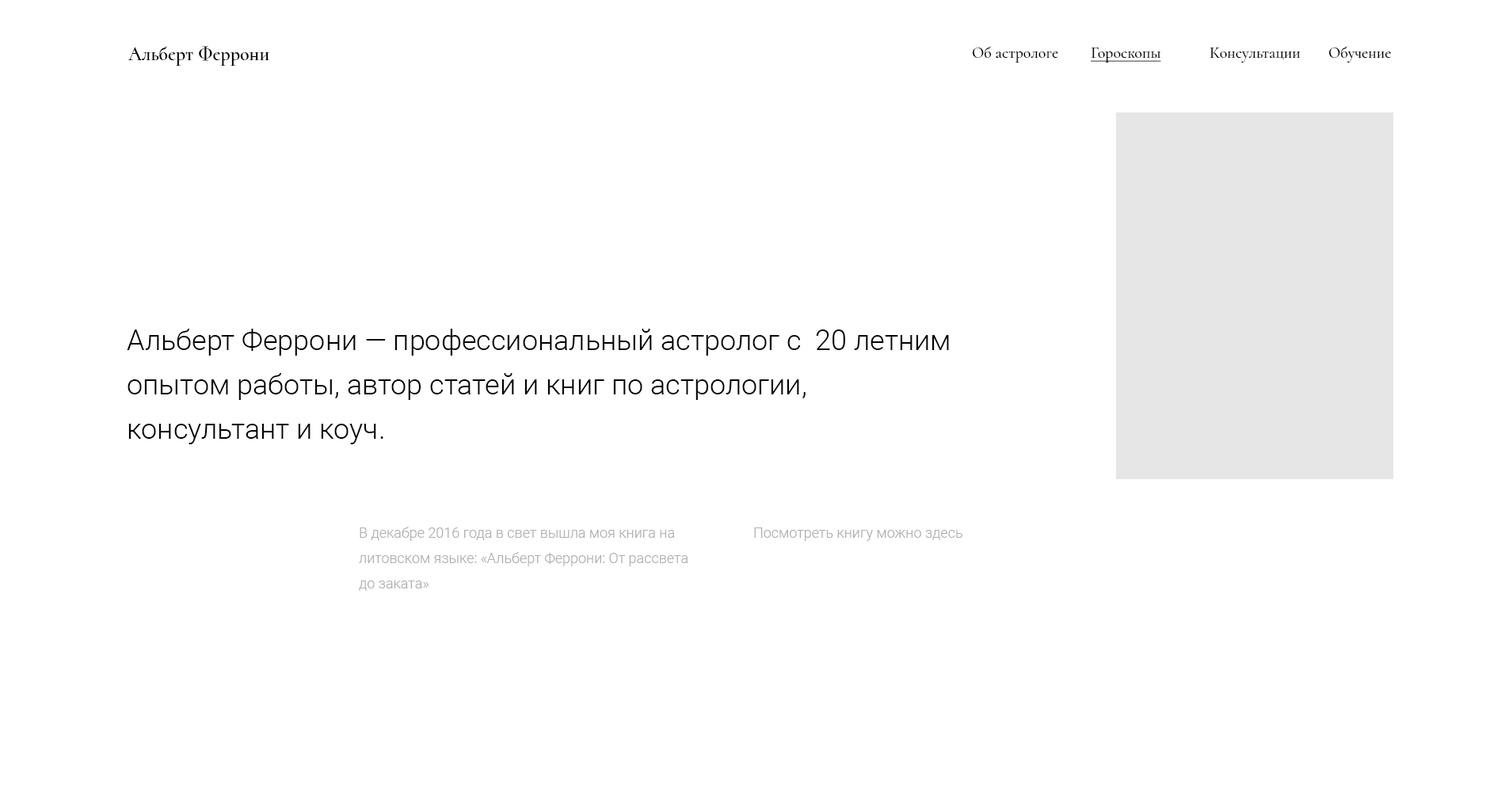
<style>
.page{position:relative;width:1505px;height:792px;background:#ffffff}
.page>*{position:absolute;margin:0}
.t1{font:19px "Cormorant-SemiBold";color:#000000}
.t2{font:15.8px "Cormorant-Medium";color:#000000}
.t3{font:15.8px "Cormorant-Medium";color:#000000;text-decoration:underline}
.t4{font:28.5px/44.4px "Roboto-Light";color:#000000}
.t5{font:14.3px/25.4px "Roboto-Light";color:#afafaf}
.t6{font:14.3px "Roboto-Light";color:#afafaf}
</style>
<div class="page">
<p class="t1" style="left:128px;top:46px;width:141px;height:20px">Альберт Феррони</p>
<p class="t2" style="left:972px;top:46px;width:86px;height:17px">Об астрологе</p>
<p class="t3" style="left:1091px;top:48px;width:70px;height:15px">Гороскопы</p>
<p class="t2" style="left:1210px;top:48px;width:91px;height:15px">Консультации</p>
<p class="t2" style="left:1329px;top:46px;width:62px;height:17px">Обучение</p>
<p class="t4" style="left:127px;top:329px;width:822px;height:115px">Альберт Феррони — профессиональный астролог с  20 летним опытом работы, автор статей и книг по астрологии, <br>консультант и коуч.</p>
<p class="t5" style="left:359px;top:527px;width:329px;height:64px">В декабре 2016 года в свет вышла моя книга на литовском языке: «Альберт Феррони: От рассвета до заката»</p>
<p class="t6" style="left:754px;top:528px;width:209px;height:13px">Посмотреть книгу можно здесь</p>
</div>
